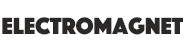
<style>
.page{position:relative;width:185px;height:50px;background:#ffffff}
.page>*{position:absolute;margin:0}
.t1{font:24.4px "Phosphate-Solid";color:#2b2828}
</style>
<div class="page">
<p class="t1" style="left:2px;top:17px;width:181px;height:18px">Electromagnet</p>
</div>
